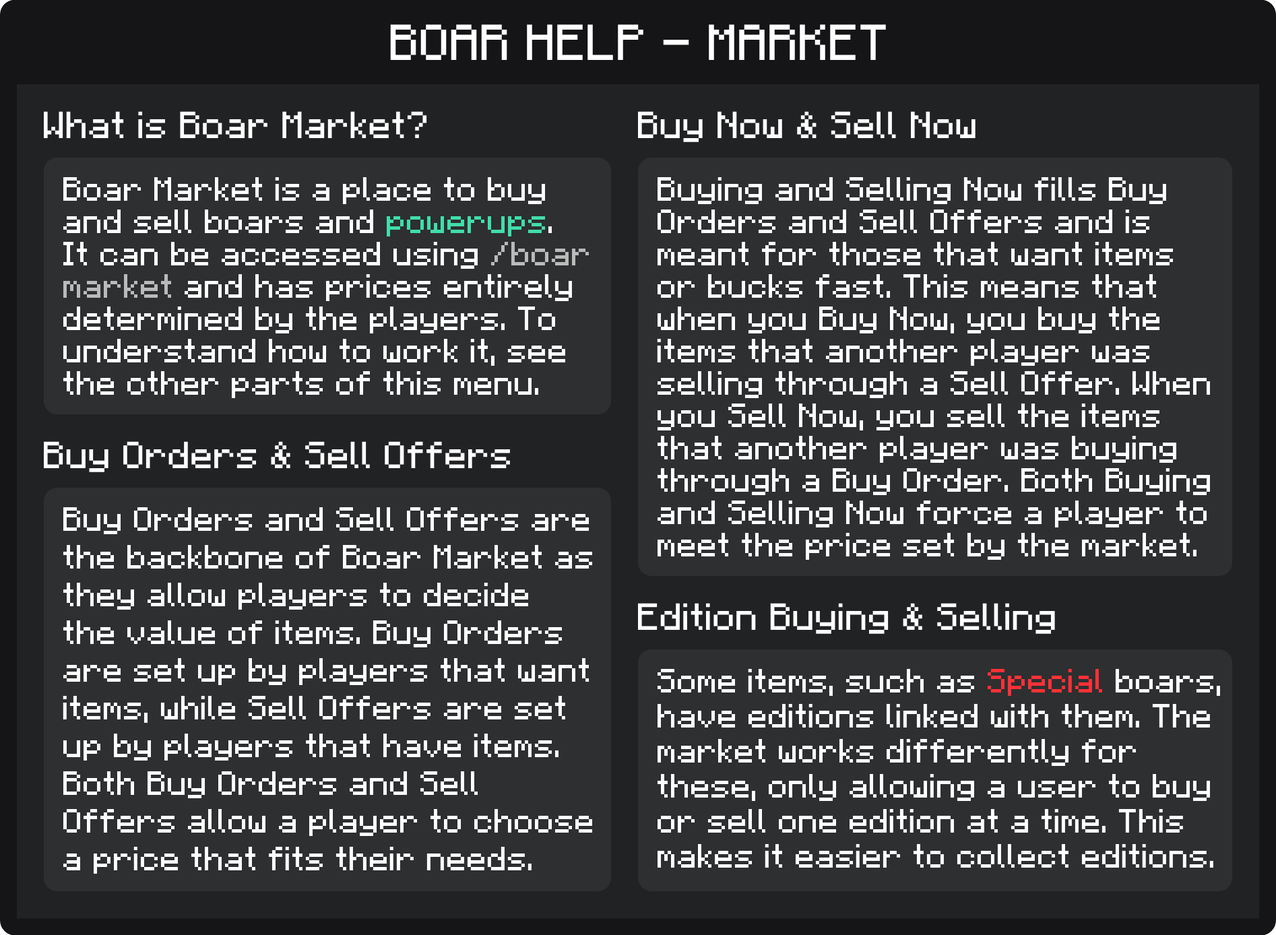
<style>
.page{position:relative;width:1276px;height:935px;background:#2d2f31}
.page>*{position:absolute;margin:0}
.t1{font:40.4px "F77-Minecraft";color:#ffffff}
.t2{font:30.3px "F77-Minecraft";color:#ffffff}
.t3{font:26.9px "F77-Minecraft";color:#ffffff}
.t4{font:26.9px "F77-Minecraft";color:#40dea9}
.t5{font:26.9px "F77-Minecraft";color:#bababa}
.t6{font:26.9px/37.7px "F77-Minecraft";color:#ffffff}
.t7{font:26.9px/35px "F77-Minecraft";color:#ffffff}
.t8{font:26.9px/35px "F77-Minecraft";color:#ff3136}
</style>
<div class="page">
<p class="t1" style="left:390px;top:24px;width:496px;height:36px">BOAR HELP - MARKET</p>
<p class="t2" style="left:44px;top:111px;width:383px;height:27px">What is Boar Market?</p>
<p class="t2" style="left:638px;top:111px;width:337px;height:31px">Buy Now &amp; Sell Now</p>
<p class="t3" style="left:63px;top:177px;width:526px;height:221px">Boar Market is a place to buy<br>and sell boars and <span class="t4">powerups</span>.<br>It can be accessed using <span class="t5">/boar<br>market </span>and has prices entirely<br>determined by the players. To<br>understand how to work it, see<br>the other parts of this menu.</p>
<p class="t3" style="left:657px;top:177px;width:553px;height:383px">Buying and Selling Now fills Buy <br>Orders and Sell Offers and is<br>meant for those that want items<br>or bucks fast. This means that <br>when you Buy Now, you buy the <br>items that another player was <br>selling through a Sell Offer. When <br>you Sell Now, you sell the items <br>that another player was buying <br>through a Buy Order. Both Buying<br>and Selling Now force a player to<br>meet the price set by the market.</p>
<p class="t2" style="left:44px;top:441px;width:466px;height:31px">Buy Orders &amp; Sell Offers</p>
<p class="t6" style="left:63px;top:507px;width:529px;height:367px">Buy Orders and Sell Offers are<br>the backbone of Boar Market as<br>they allow players to decide<br>the value of items. Buy Orders<br>are set up by players that want<br>items, while Sell Offers are set <br>up by players that have items. <br>Both Buy Orders and Sell <br>Offers allow a player to choose<br>a price that fits their needs.</p>
<p class="t2" style="left:638px;top:603px;width:417px;height:31px">Edition Buying &amp; Selling</p>
<p class="t7" style="left:657px;top:669px;width:563px;height:198px">Some items, such as <span class="t8">Special </span>boars,<br>have editions linked with them. The<br>market works differently for<br>these, only allowing a user to buy<br>or sell one edition at a time. This<br>makes it easier to collect editions.</p>
</div>
